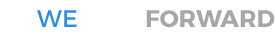
<style>
.page{position:relative;width:275px;height:38px;background:#ffffff}
.page>*{position:absolute;margin:0}
.t1{font:24px "Montserrat-Bold";color:#a7a7a7}
.t2{font:24px "Montserrat-Regular";color:#2b8be9}
.t3{font:24px "Montserrat-Bold";color:#ffffff}
</style>
<div class="page">
<p class="t1" style="left:37px;top:10px;width:238px;height:18px"><span class="t2">WE</span><span class="t3">LEAN</span>FORWARD</p>
</div>
